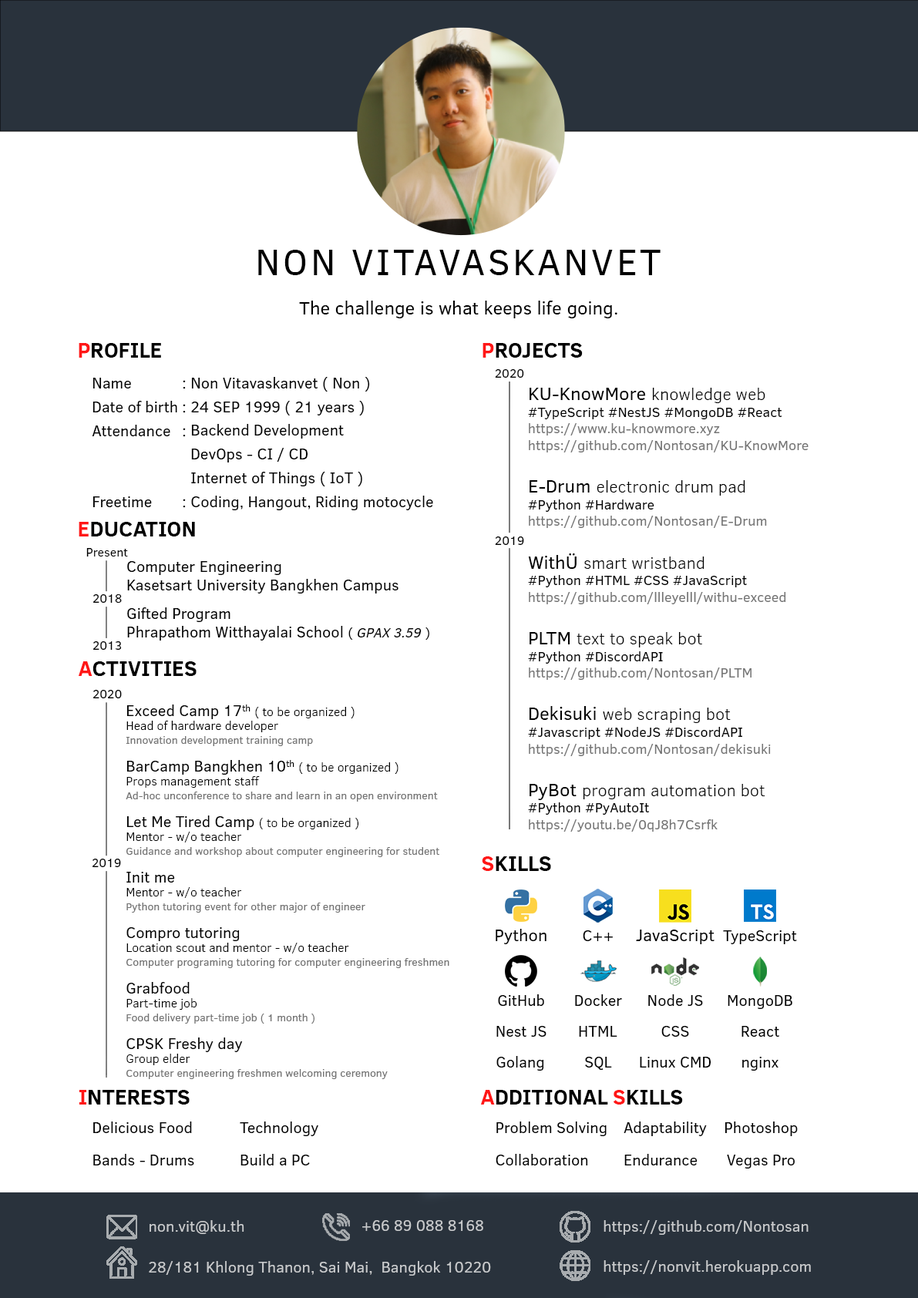
<style>
.page{position:relative;width:918px;height:1298px;background:#ffffff}
.page>*{position:absolute;margin:0}
.t1{font:37px "ClearSans";letter-spacing:0.075em;color:#000000}
.t2{font:18.5px "ClearSans";color:#000000}
.t3{font:21.6px "ClearSans-Bold";color:#000000}
.t4{font:21.6px "ClearSans-Bold";color:#ff1616}
.t5{font:15.4px/23.7px "ClearSans";color:#000000}
.t6{font:12.3px "ClearSans";color:#000000}
.t7{font:13.9px "ClearSans";color:#737373}
.t8{font:17px "ClearSans-Light";color:#000000}
.t9{font:13.9px "ClearSans";color:#000000}
.t10{font:15.4px "ClearSans";color:#000000}
.t11{font:15.4px/10px "ClearSans";color:#000000}
.t12{font:13.9px "ClearSans-Italic";color:#000000}
.t13{font:10.8px/13.9px "ClearSans";color:#737373}
.t14{font:15.4px/13.9px "ClearSans";color:#000000}
.t15{font:12.3px/13.9px "ClearSans-Light";color:#000000}
.t16{font:17px "ClearSans";color:#000000}
.t17{font:15.4px/32.4px "ClearSans";color:#000000}
.t18{font:15.4px "ClearSans";color:#c8cacc}
</style>
<div class="page">
<p class="t1" style="left:258px;top:250px;width:403px;height:25px">NON VITAVASKANVET</p>
<p class="t2" style="left:299px;top:301px;width:319px;height:17px">The challenge is what keeps life going.</p>
<p class="t3" style="left:79px;top:343px;width:82px;height:15px"><span class="t4">P</span>ROFILE</p>
<p class="t3" style="left:483px;top:343px;width:100px;height:15px"><span class="t4">P</span>ROJECTS</p>
<p class="t5" style="left:92px;top:378px;width:85px;height:129px">Name<br>Date of birth<br>Attendance<br><br><br>Freetime<br><br>                        Playing music</p>
<p class="t5" style="left:191px;top:377px;width:242px;height:133px">Non Vitavaskanvet ( Non )<br>24 SEP 1999 ( 21 years )<br>Backend Development<br>DevOps - CI / CD<br>Internet of Things ( IoT )<br>Coding, Hangout, Riding motocycle</p>
<p class="t6" style="left:495px;top:369px;width:29px;height:9px">2020</p>
<p class="t5" style="left:183px;top:380px;width:3px;height:128px">:<br>:<br>:<br><br><br>:<br><br><br>                        Playing music</p>
<p class="t7" style="left:528px;top:388px;width:281px;height:444px"><span class="t2">KU-KnowMore </span><span class="t8">knowledge web<br></span><span class="t9">#TypeScript #NestJS #MongoDB #React</span><br>https://www.ku-knowmore.xyz<br>https://github.com/Nontosan/KU-KnowMore<br><br><span class="t2">E-Drum </span><span class="t8">electronic drum pad<br></span><span class="t9">#Python #Hardware</span><br>https://github.com/Nontosan/E-Drum<br><br><span class="t2">WithÜ </span><span class="t8">smart wristband<br></span><span class="t9">#Python #HTML #CSS #JavaScript</span><br>https://github.com/llleyelll/withu-exceed<br><br><span class="t2">PLTM </span><span class="t8">text to speak bot<br></span><span class="t9">#Python #DiscordAPI</span><br>https://github.com/Nontosan/PLTM<br><br><span class="t2">Dekisuki </span><span class="t8">web scraping bot<br></span><span class="t9">#Javascript #NodeJS #DiscordAPI</span><br>https://github.com/Nontosan/dekisuki<br><br><span class="t2">PyBot </span><span class="t8">program automation bot<br></span><span class="t9">#Python #PyAutoIt</span><br>https://youtu.be/0qJ8h7Csrfk</p>
<p class="t3" style="left:79px;top:522px;width:116px;height:15px"><span class="t4">E</span>DUCATION</p>
<p class="t6" style="left:495px;top:537px;width:29px;height:8px">2019</p>
<p class="t6" style="left:86px;top:548px;width:42px;height:9px">Present</p>
<p class="t10" style="left:127px;top:561px;width:302px;height:80px">Computer Engineering<br>Kasetsart University Bangkhen Campus <br><br><span class="t11">Gifted Program<br></span>Phrapathom Witthayalai School <span class="t9">(</span><span class="t12"> GPAX 3.59 </span><span class="t9">)</span></p>
<p class="t6" style="left:93px;top:594px;width:29px;height:9px">2018</p>
<p class="t6" style="left:93px;top:642px;width:29px;height:8px">2013</p>
<p class="t3" style="left:79px;top:662px;width:118px;height:14px"><span class="t4">A</span>CTIVITIES</p>
<p class="t6" style="left:93px;top:690px;width:29px;height:9px">2020</p>
<p class="t13" style="left:126px;top:705px;width:324px;height:374px"><span class="t14">Exceed Camp 17th </span><span class="t15">( to be organized )<br>Head of hardware developer<br></span>Innovation development training camp<br><br><span class="t14">BarCamp Bangkhen 10th </span><span class="t15">( to be organized )<br>Props management staff<br></span>Ad-hoc unconference to share and learn in an open environment<br><br><span class="t14">Let Me Tired Camp </span><span class="t15">( to be organized )<br>Mentor - w/o teacher<br></span>Guidance and workshop about computer engineering for student <br><br><span class="t14">Init me<br></span><span class="t15">Mentor - w/o teacher<br></span>Python tutoring event for other major of engineer <br><br><span class="t14">Compro tutoring<br></span><span class="t15">Location scout and mentor - w/o teacher<br></span>Computer programing tutoring for computer engineering freshmen<br><br><span class="t14">Grabfood<br></span><span class="t15">Part-time job<br></span>Food delivery part-time job ( 1 month )<br><br><span class="t14">CPSK Freshy day<br></span><span class="t15">Group elder<br></span>Computer engineering freshmen welcoming ceremony</p>
<p class="t3" style="left:482px;top:857px;width:69px;height:14px"><span class="t4">S</span>KILLS</p>
<p class="t6" style="left:93px;top:859px;width:28px;height:8px">2019</p>
<p class="t16" style="left:496px;top:929px;width:51px;height:16px">Python</p>
<p class="t16" style="left:636px;top:930px;width:79px;height:15px">JavaScript</p>
<p class="t10" style="left:583px;top:931px;width:30px;height:10px">C++</p>
<p class="t10" style="left:723px;top:931px;width:74px;height:14px">TypeScript</p>
<p class="t10" style="left:498px;top:995px;width:46px;height:11px">GitHub</p>
<p class="t10" style="left:575px;top:995px;width:47px;height:11px">Docker</p>
<p class="t10" style="left:648px;top:995px;width:55px;height:11px">Node JS</p>
<p class="t10" style="left:728px;top:995px;width:65px;height:14px">MongoDB</p>
<p class="t10" style="left:497px;top:1026px;width:50px;height:11px">Nest JS</p>
<p class="t10" style="left:579px;top:1026px;width:39px;height:11px">HTML</p>
<p class="t10" style="left:662px;top:1026px;width:27px;height:11px">CSS</p>
<p class="t10" style="left:742px;top:1026px;width:38px;height:11px">React</p>
<p class="t10" style="left:497px;top:1056px;width:47px;height:15px">Golang</p>
<p class="t10" style="left:585px;top:1057px;width:27px;height:13px">SQL</p>
<p class="t10" style="left:640px;top:1057px;width:72px;height:11px">Linux CMD</p>
<p class="t10" style="left:743px;top:1057px;width:36px;height:14px">nginx</p>
<p class="t3" style="left:79px;top:1090px;width:111px;height:15px"><span class="t4">I</span>NTERESTS</p>
<p class="t3" style="left:481px;top:1090px;width:202px;height:15px"><span class="t4">A</span>DDITIONAL <span class="t4">S</span>KILLS</p>
<p class="t17" style="left:93px;top:1122px;width:101px;height:44px">Delicious Food<br>Bands - Drums</p>
<p class="t17" style="left:240px;top:1122px;width:78px;height:44px">Technology<br>Build a PC</p>
<p class="t17" style="left:496px;top:1122px;width:111px;height:44px">Problem Solving<br>Collaboration</p>
<p class="t17" style="left:624px;top:1122px;width:83px;height:44px">Adaptability<br>Endurance</p>
<p class="t17" style="left:725px;top:1122px;width:73px;height:47px;text-align:center">Photoshop<br>Vegas Pro</p>
<p class="t18" style="left:150px;top:1221px;width:94px;height:13px">non.vit@ku.th</p>
<p class="t18" style="left:362px;top:1221px;width:121px;height:10px">+66 89 088 8168</p>
<p class="t18" style="left:604px;top:1221px;width:205px;height:14px">https://github.com/Nontosan</p>
<p class="t18" style="left:149px;top:1261px;width:342px;height:15px">28/181 Khlong Thanon, Sai Mai,  Bangkok 10220</p>
<p class="t18" style="left:604px;top:1261px;width:207px;height:14px">https://nonvit.herokuapp.com</p>
</div>
